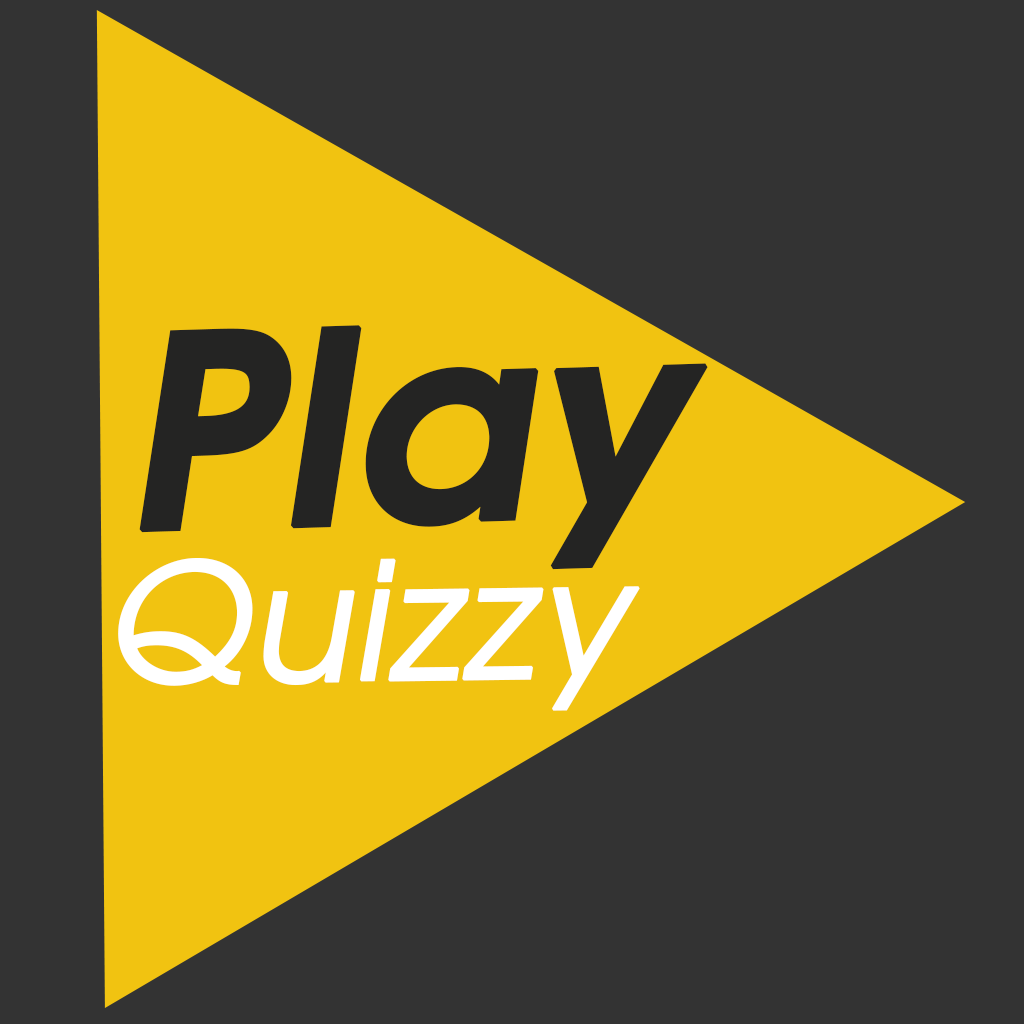
<style>
.page{position:relative;width:1024px;height:1024px;background:#333333}
.page>*{position:absolute;margin:0}
.t1{font:265.2px "TeXGyreAdventor-BoldItalic";color:#242423;font-weight:bold}
.t2{font:162.9px "TeXGyreAdventor-Italic";color:#ffffff;font-weight:bold}
</style>
<div class="page">
<p class="t1" style="left:139px;top:325px;width:569px;height:245px;rotate:-2deg">Play</p>
<p class="t2" style="left:118px;top:558px;width:522px;height:153px;rotate:-1deg">Quizzy</p>
</div>
